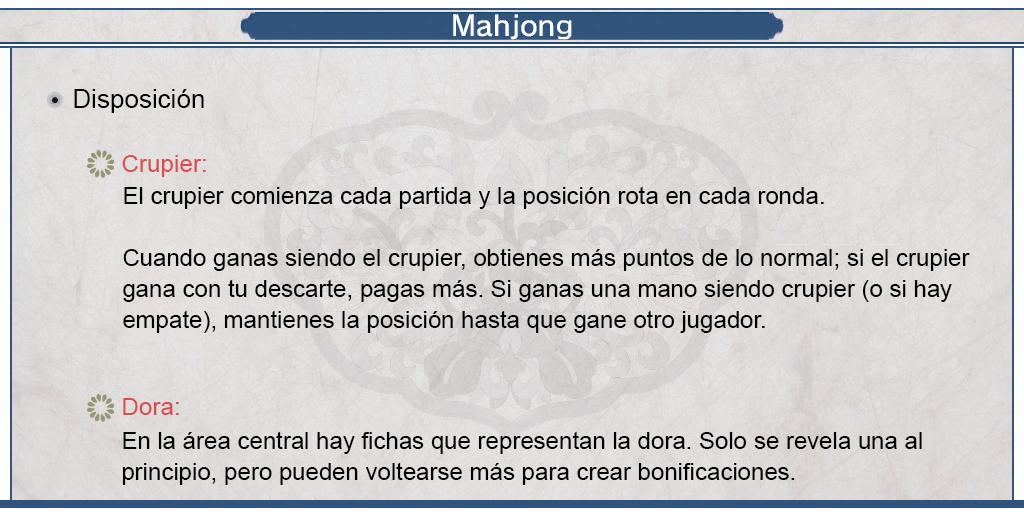
<style>
.page{position:relative;width:1024px;height:512px}
.page>*{position:absolute;margin:0}
.t1{font:26px "ArialMT";color:#000000}
.t2{font:24px "ArialMT";color:#d64d52}
.t3{font:24px/31px "ArialMT";color:#000000}
</style>
<div class="page">
<p class="t1" style="left:74px;top:89px;width:130px;height:24px">Disposición</p>
<p class="t2" style="left:122px;top:155px;width:84px;height:22px">Crupier:</p>
<p class="t3" style="left:123px;top:186px;width:847px;height:147px;text-align:justify">El crupier comienza cada partida y la posición rota en cada ronda.<br><br>Cuando ganas siendo el crupier, obtienes más puntos de lo normal; si el crupier<br>gana con tu descarte, pagas más. Si ganas una mano siendo crupier (o si hay<br>empate), mantienes la posición hasta que gane otro jugador.</p>
<p class="t2" style="left:123px;top:398px;width:56px;height:17px">Dora:</p>
<p class="t3" style="left:122px;top:431px;width:800px;height:54px;text-align:justify">En la área central hay fichas que representan la dora. Solo se revela una al <br>principio, pero pueden voltearse más para crear bonificaciones.</p>
</div>
